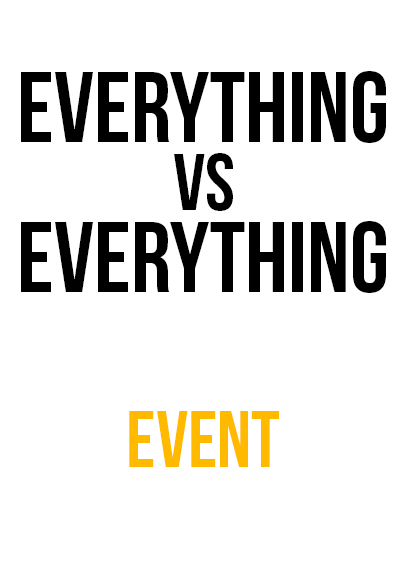
<style>
.page{position:relative;width:408px;height:585px;background:#ffffff}
.page>*{position:absolute;margin:0}
.t1{font:100px "BebasNeue";color:#000000}
.t2{font:80px "BebasNeue";color:#000000}
.t3{font:80px "BebasNeue";color:#ffba00}
</style>
<div class="page">
<p class="t1" style="left:21px;top:71px;width:365px;height:72px">everything</p>
<p class="t2" style="left:174px;top:153px;width:59px;height:58px">vs</p>
<p class="t1" style="left:21px;top:221px;width:365px;height:72px">everything</p>
<p class="t3" style="left:129px;top:411px;width:150px;height:56px">event</p>
</div>
